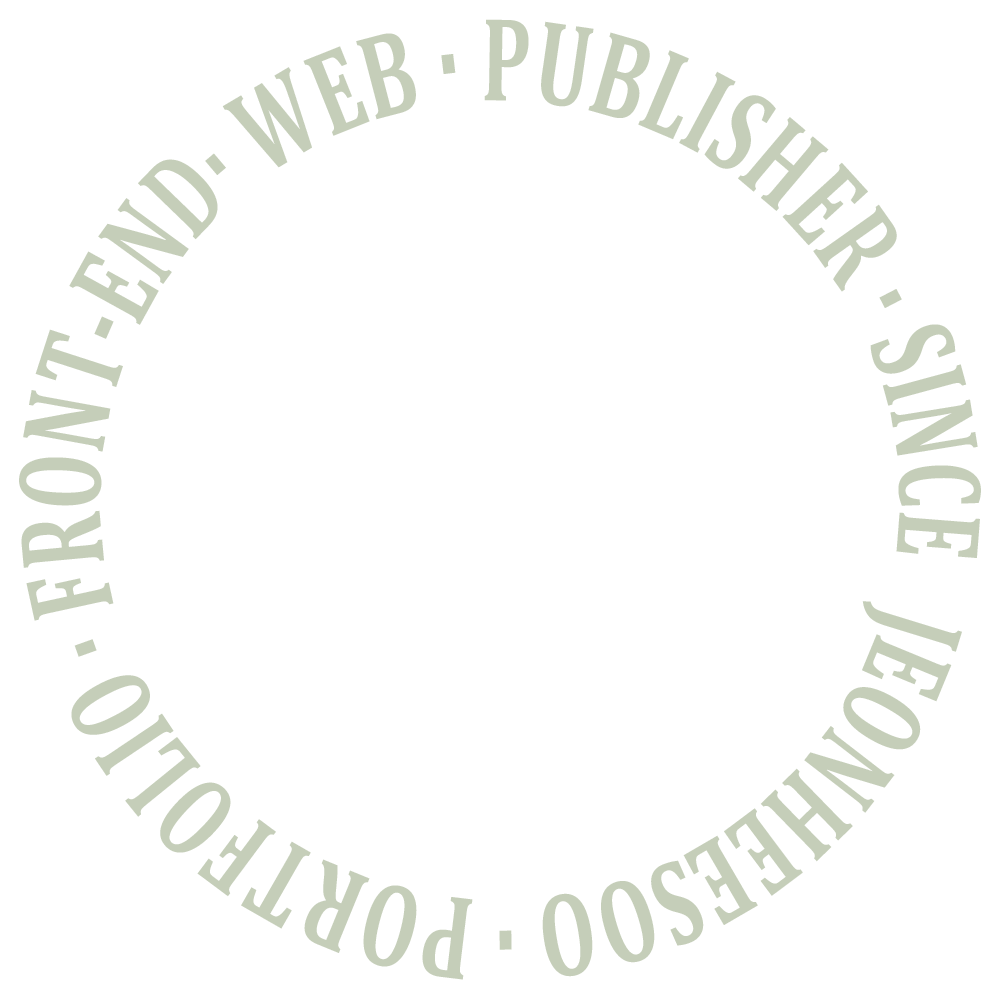
<style>
.page{position:relative;width:1000px;height:1000px;background:#ffffff}
.page>*{position:absolute;margin:0}
.t1{font:120.6px "Cambria-Bold";color:#c5ceb9;scale:0.67 1}
</style>
<div class="page">
<p class="t1" style="left:19px;top:19px;width:962px;height:961px;text-align:center">JEONHEESOO · PORTFOLIO · FRONT-END· WEB · PUBLISHER · SINCE 2023 ·</p>
</div>
